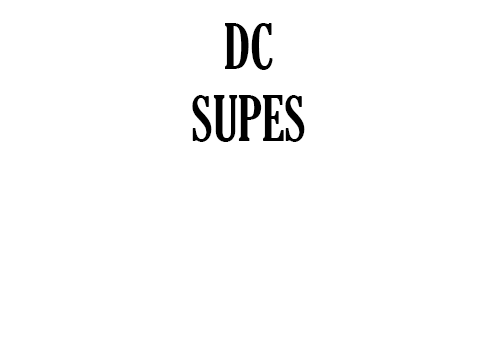
<style>
.page{position:relative;width:504px;height:360px;background:#ffffff}
.page>*{position:absolute;margin:0}
.t1{font:60px "GloucesterMT-ExtraCondensed";color:#000000}
</style>
<div class="page">
<p class="t1" style="left:192px;top:23px;width:113px;height:119px;text-align:center">DC<br>SUPES</p>
</div>
